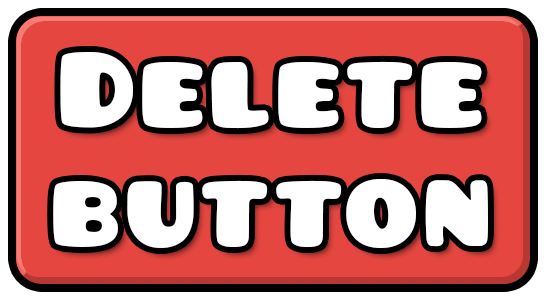
<style>
.page{position:relative;width:550px;height:300px;background:#e54640}
.page>*{position:absolute;margin:0}
.t1{font:116px/119px "Pusab";letter-spacing:0.04em;color:#ffffff}
</style>
<div class="page">
<p class="t1" style="left:53px;top:52px;width:435px;height:196px;text-align:center">Delete<br>button</p>
</div>
